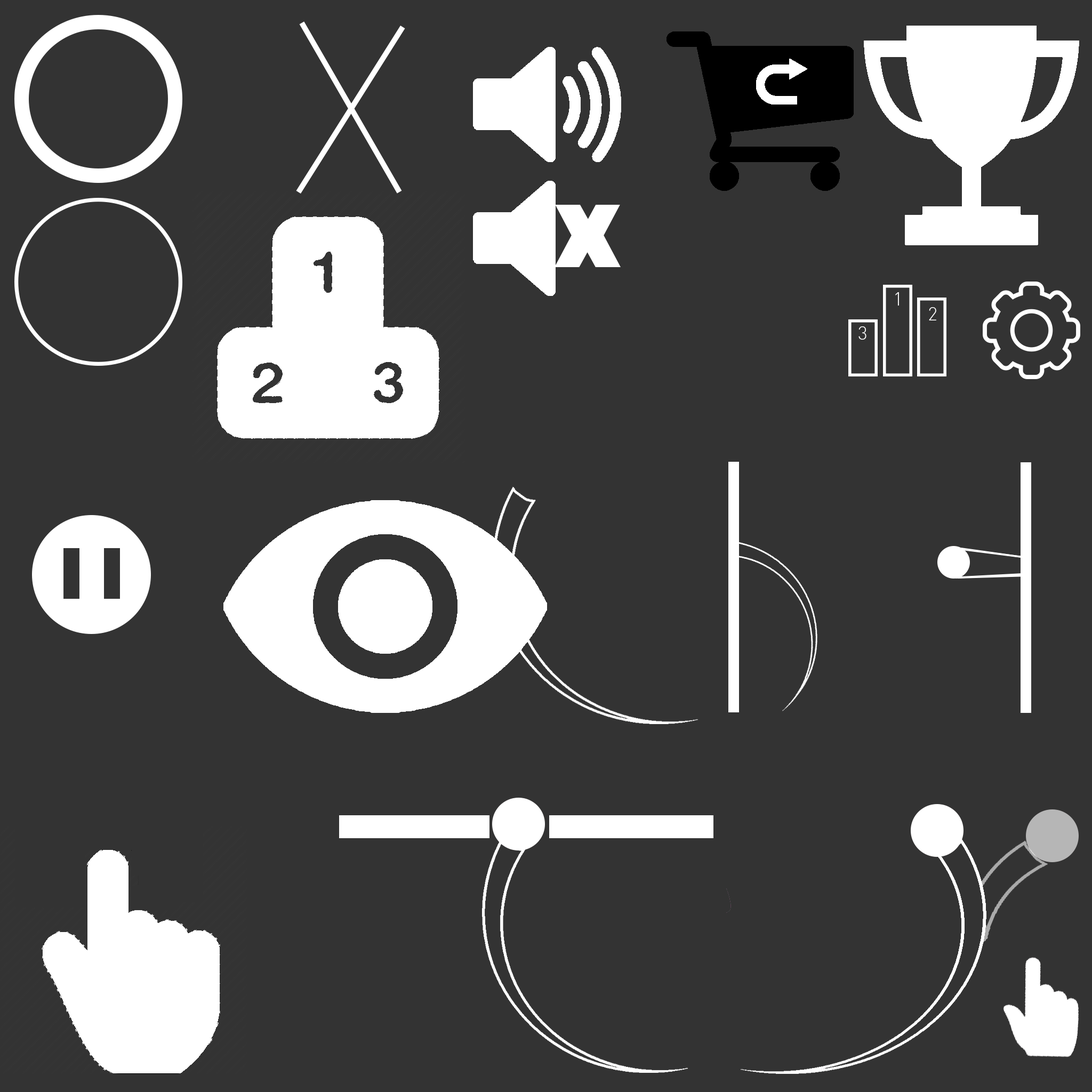
<style>
.page{position:relative;width:1092px;height:1092px;background:#333333}
.page>*{position:absolute;margin:0}
.t1{font:18.5px "DINPro-Light";letter-spacing:0.34em;color:#ffffff}
</style>
<div class="page">
<p class="t1" style="left:895px;top:292px;width:4px;height:14px">1v</p>
<p class="t1" style="left:929px;top:307px;width:7px;height:13px">2v</p>
<p class="t1" style="left:858px;top:326px;width:8px;height:14px">3v</p>
</div>
